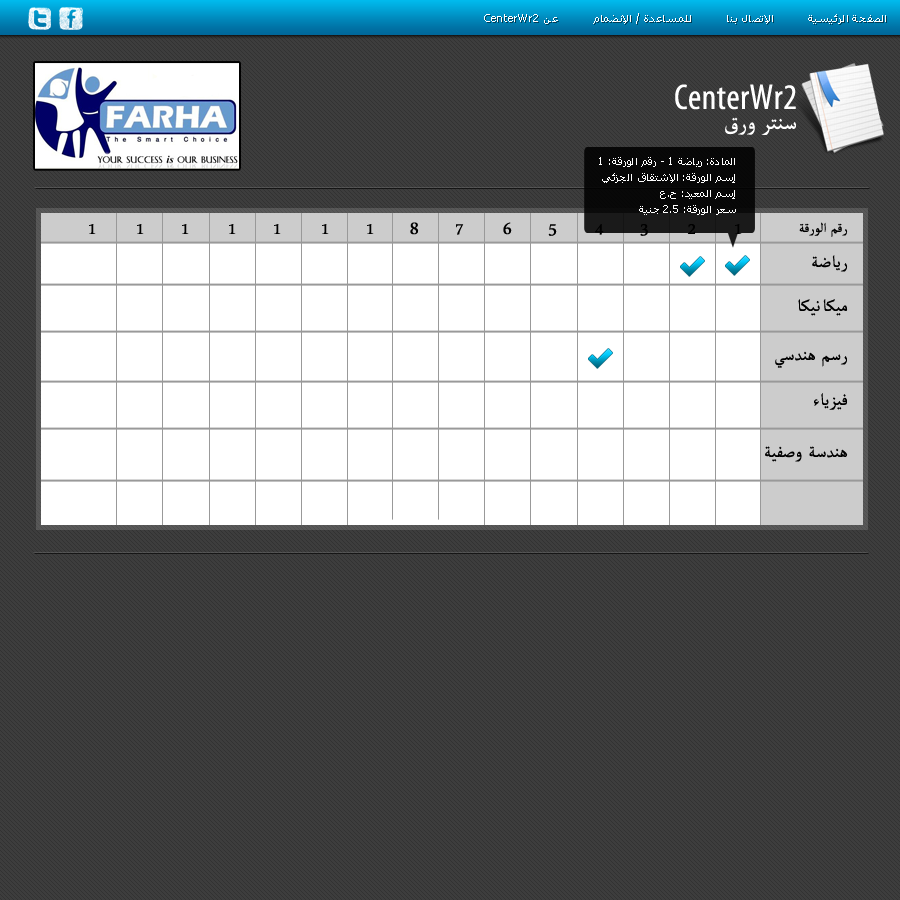
<style>
.page{position:relative;width:900px;height:900px;background:#3d3d3d}
.page>*{position:absolute;margin:0}
.t1{font:11.3px "Tahoma";letter-spacing:0.015em;color:#ffffff}
.t2{font:36px "MyriadPro-Cond";letter-spacing:0.015em;color:#ffffff}
.t3{font:30px "MicrosoftUighur";letter-spacing:0.015em;color:#ffffff}
.t4{font:10.7px/16px "Tahoma";letter-spacing:0.015em;color:#ffffff}
.t5{font:24px "MicrosoftUighur";letter-spacing:0.015em;color:#000000}
.t6{font:18.7px "MicrosoftUighur";letter-spacing:0.015em;color:#000000}
</style>
<div class="page">
<p class="t1" style="left:484px;top:13px;width:402px;height:11px">الصفحة الرئيسية         الإتصال بنا         للمساعدة / الإنضمام         عن CenterWr2</p>
<p class="t2" style="left:675px;top:84px;width:121px;height:26px">CenterWr2</p>
<p class="t3" style="left:725px;top:117px;width:71px;height:18px">سنتر ورق</p>
<p class="t4" style="left:599px;top:157px;width:137px;height:58px">المادة: رياضة 1 - رقم الورقة: 1<br>إسم الورقة: الإشتقاق الجزئي<br>إسم المعيد: ح.ع<br>سعر الورقة: 2.5 جنية</p>
<p class="t5" style="left:410px;top:222px;width:9px;height:13px">8</p>
<p class="t5" style="left:503px;top:222px;width:9px;height:13px">6</p>
<p class="t6" style="left:799px;top:222px;width:49px;height:15px">رقم الورقة</p>
<p class="t5" style="left:89px;top:224px;width:7px;height:10px">1</p>
<p class="t5" style="left:137px;top:224px;width:7px;height:10px">1</p>
<p class="t5" style="left:182px;top:224px;width:7px;height:10px">1</p>
<p class="t5" style="left:229px;top:224px;width:7px;height:10px">1</p>
<p class="t5" style="left:274px;top:224px;width:7px;height:10px">1</p>
<p class="t5" style="left:322px;top:224px;width:7px;height:10px">1</p>
<p class="t5" style="left:367px;top:224px;width:7px;height:10px">1</p>
<p class="t5" style="left:456px;top:224px;width:8px;height:11px">7</p>
<p class="t5" style="left:548px;top:224px;width:9px;height:12px">5</p>
<p class="t5" style="left:595px;top:224px;width:9px;height:11px">4</p>
<p class="t5" style="left:640px;top:224px;width:8px;height:12px">3</p>
<p class="t5" style="left:687px;top:224px;width:9px;height:10px">2</p>
<p class="t5" style="left:735px;top:224px;width:7px;height:10px">1</p>
<p class="t5" style="left:812px;top:255px;width:36px;height:17px">رياضة</p>
<p class="t5" style="left:798px;top:299px;width:50px;height:17px">ميكانيكا</p>
<p class="t5" style="left:775px;top:351px;width:72px;height:17px">رسم هندسي</p>
<p class="t5" style="left:814px;top:393px;width:33px;height:17px">فيزياء</p>
<p class="t5" style="left:765px;top:446px;width:83px;height:16px">هندسة وصفية</p>
</div>
